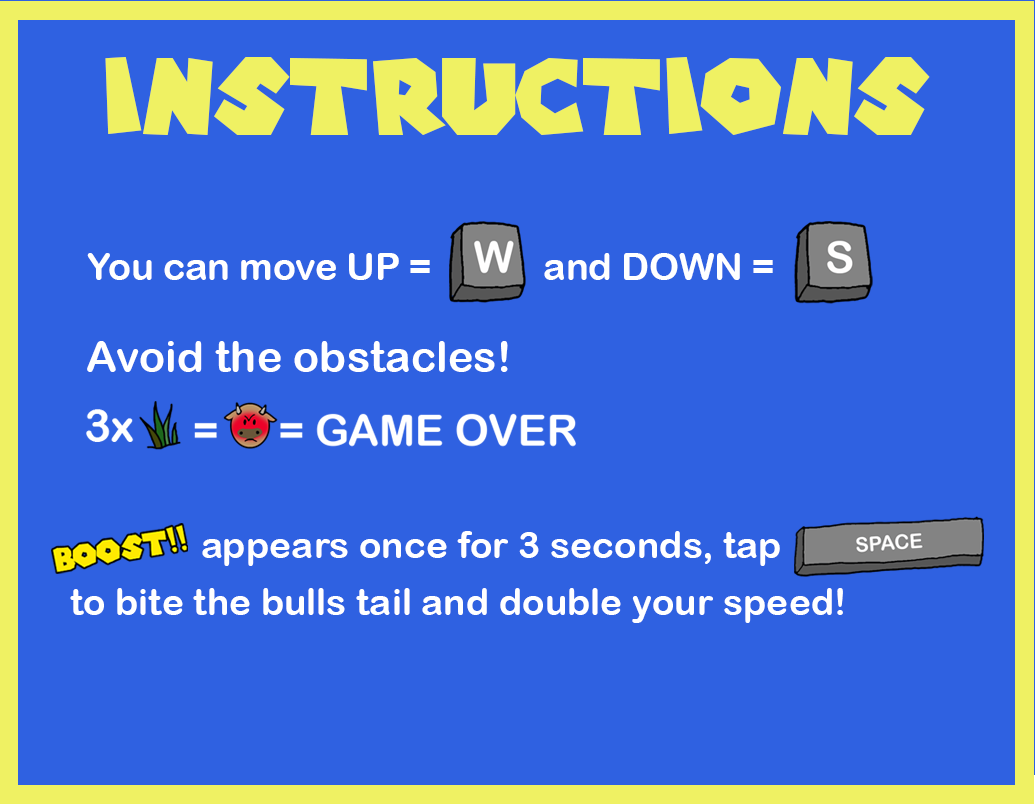
<style>
.page{position:relative;width:1035px;height:804px;background:#2f61e1}
.page>*{position:absolute;margin:0}
.t1{font:104.2px "SuperMarioGalaxy";color:#eff163}
.t2{font:37.5px "ArialRoundedMTBold";color:#ffffff}
.t3{font:43.4px "ArialRoundedMTBold";color:#ffffff}
.t4{font:37.4px "ArialRoundedMTBold";color:#ffffff}
</style>
<div class="page">
<p class="t1" style="left:105px;top:57px;width:825px;height:78px">Instructions</p>
<p class="t2" style="left:87px;top:253px;width:686px;height:27px">You can move UP =            and DOWN =</p>
<p class="t3" style="left:87px;top:341px;width:421px;height:31px">Avoid the obstacles!</p>
<p class="t4" style="left:202px;top:531px;width:578px;height:35px">appears once for 3 seconds, tap</p>
<p class="t4" style="left:70px;top:588px;width:773px;height:35px">to bite the bulls tail and double your speed!</p>
</div>
